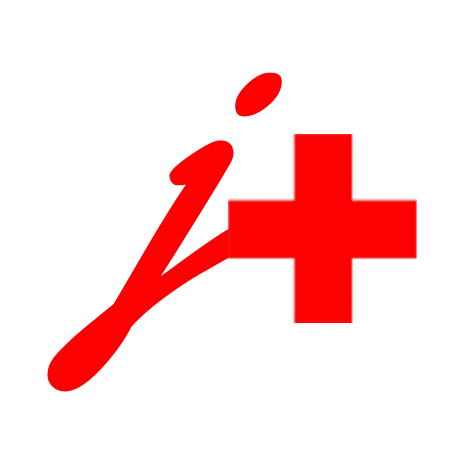
<style>
.page{position:relative;width:464px;height:464px;background:#ffffff}
.page>*{position:absolute;margin:0}
.t1{font:369.6px "Yellowtail-Regular";letter-spacing:0.025em;color:#fb0102}
</style>
<div class="page">
<p class="t1" style="left:47px;top:72px;width:235px;height:320px">j</p>
</div>
